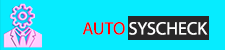
<style>
.page{position:relative;width:225px;height:50px;background:#06ecff}
.page>*{position:absolute;margin:0}
.t1{font:18px "MyriadPro-Regular";color:#ffffff}
.t2{font:16px "ArialMT";color:#ff0000}
.t3{font:18px "MyriadPro-Regular";color:#ff0000}
</style>
<div class="page">
<p class="t1" style="left:82px;top:22px;width:126px;height:13px"><span class="t2">     </span><span class="t3">AUTO </span>SYSCHECK</p>
</div>
